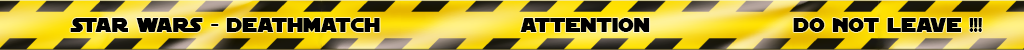
<style>
.page{position:relative;width:1024px;height:50px}
.page>*{position:absolute;margin:0}
.t1{font:21px "SFDistantGalaxy";color:#000000}
</style>
<div class="page">
<p class="t1" style="left:70px;top:18px;width:310px;height:14px">Star Wars - Deathmatch</p>
<p class="t1" style="left:520px;top:18px;width:130px;height:14px">Attention</p>
<p class="t1" style="left:793px;top:18px;width:189px;height:14px">Do Not leave !!!</p>
</div>
